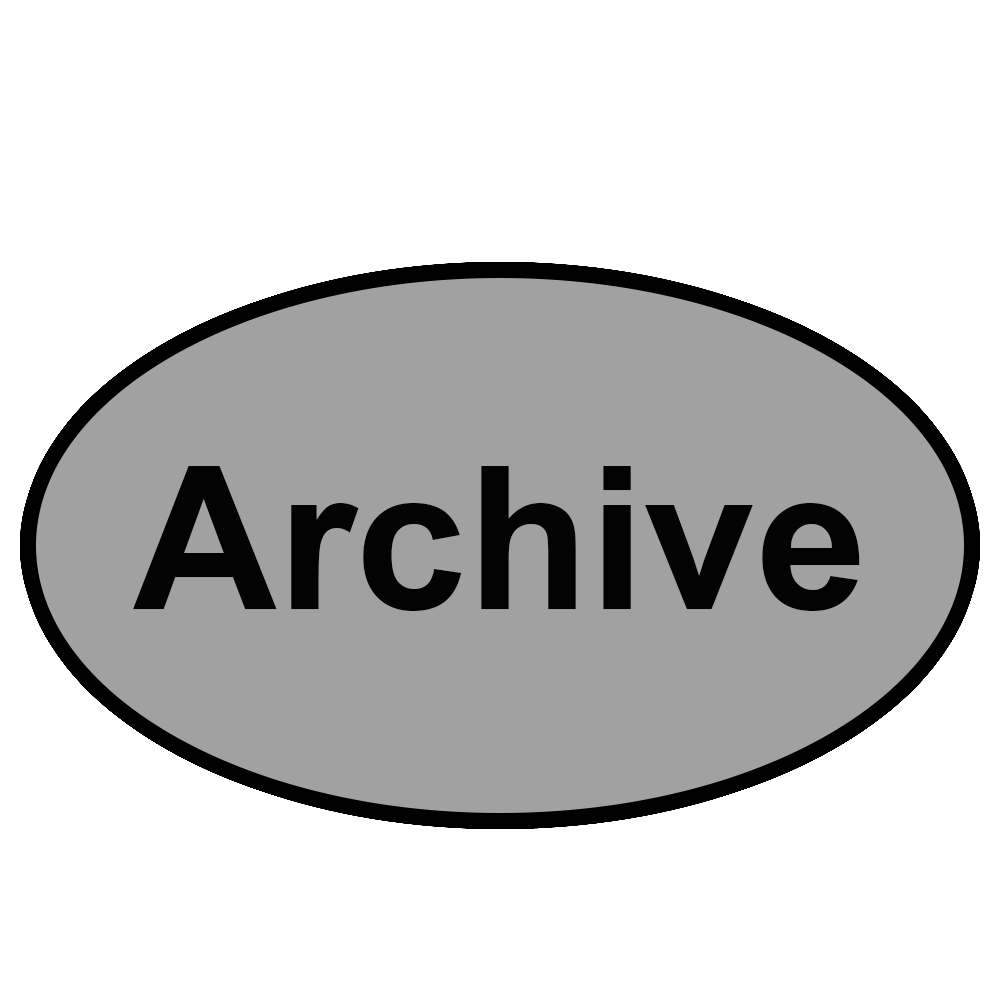
<style>
.page{position:relative;width:1000px;height:1000px;background:#ffffff}
.page>*{position:absolute;margin:0}
.t1{font:200px "Arial-BoldMT";color:#030303}
</style>
<div class="page">
<p class="t1" style="left:133px;top:466px;width:727px;height:145px">Archive</p>
</div>
